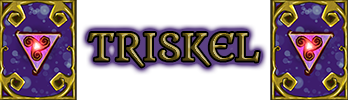
<style>
.page{position:relative;width:348px;height:100px;background:#ffffff}
.page>*{position:absolute;margin:0}
.t1{font:34.8px "Metamorphous";font-weight:bold}
</style>
<div class="page">
<p class="t1" style="left:88px;top:33px;width:171px;height:34px">TRISKEL</p>
</div>
